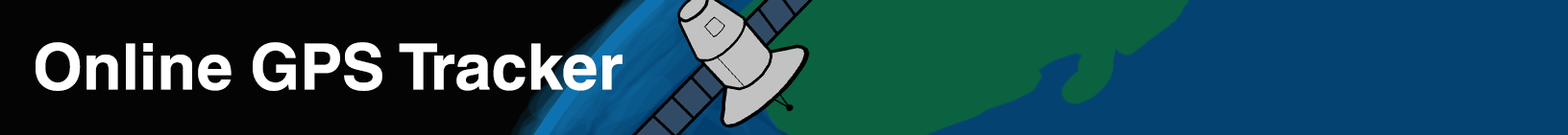
<style>
.page{position:relative;width:1568px;height:135px;background:#044272}
.page>*{position:absolute;margin:0}
.t1{font:64px "HelveticaWorld-Bold";color:#ffffff}
</style>
<div class="page">
<p class="t1" style="left:36px;top:42px;width:587px;height:49px">Online GPS Tracker</p>
</div>
